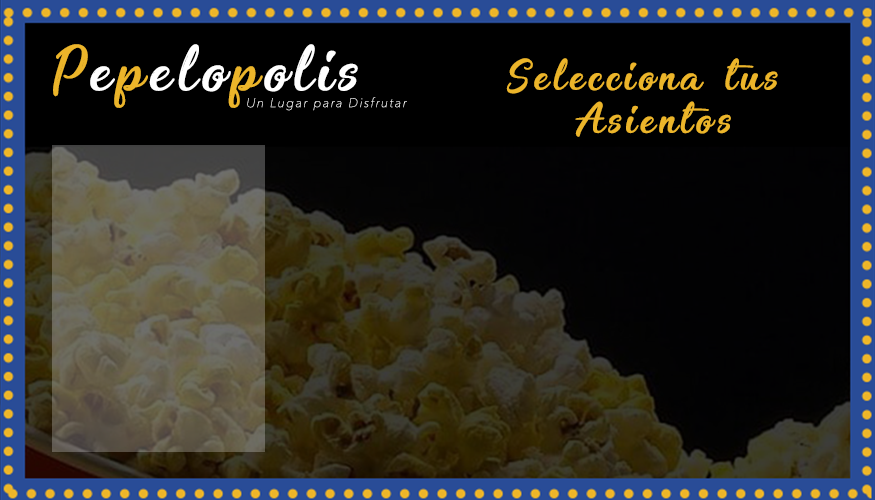
<style>
.page{position:relative;width:875px;height:500px;background:#000000}
.page>*{position:absolute;margin:0}
.t1{font:53.3px "Enchanting-Celebrations";letter-spacing:0.12em;color:#ffffff}
.t2{font:53.3px "Enchanting-Celebrations";letter-spacing:0.12em;color:#ecb52a}
.t3{font:36px "Enchanting-Celebrations";letter-spacing:0.12em;color:#ecb52a}
.t4{font:12.5px "AvenirNext-UltraLightItalic";letter-spacing:0.12em;color:#ffffff}
</style>
<div class="page">
<p class="t1" style="left:53px;top:44px;width:305px;height:64px"><span class="t2">P</span>e<span class="t2">p</span>elo<span class="t2">p</span>olis</p>
<p class="t3" style="left:506px;top:58px;width:272px;height:79px;text-align:center">Selecciona tus <br>Asientos</p>
<p class="t4" style="left:247px;top:97px;width:160px;height:14px">Un Lugar para Disfrutar</p>
</div>
